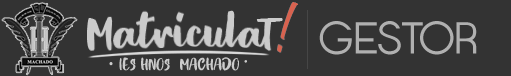
<style>
.page{position:relative;width:511px;height:76px;background:#333333}
.page>*{position:absolute;margin:0}
.t1{font:44.7px "Opificio";color:#b0b0b0}
.t2{font:25.1px "Blackout";color:#cbcbcb}
.t3{font:25.1px "MyriadPro-Regular";color:#cbcbcb}
</style>
<div class="page">
<p class="t1" style="left:319px;top:21px;width:158px;height:34px">GESTOR</p>
<p class="t2" style="left:109px;top:57px;width:138px;height:14px"><span class="t3">· </span>IES HNOS. MACHADO ·</p>
</div>
